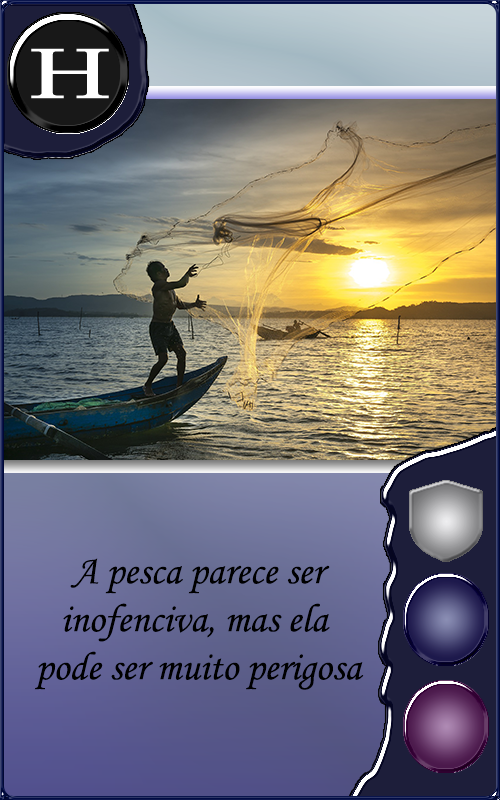
<style>
.page{position:relative;width:500px;height:800px}
.page>*{position:absolute;margin:0}
.t1{font:40px "MonotypeCorsiva";color:#000000}
</style>
<div class="page">
<p class="t1" style="left:34px;top:558px;width:330px;height:132px;text-align:center">A pesca parece ser<br>inofenciva, mas ela <br>pode ser muito perigosa</p>
</div>
